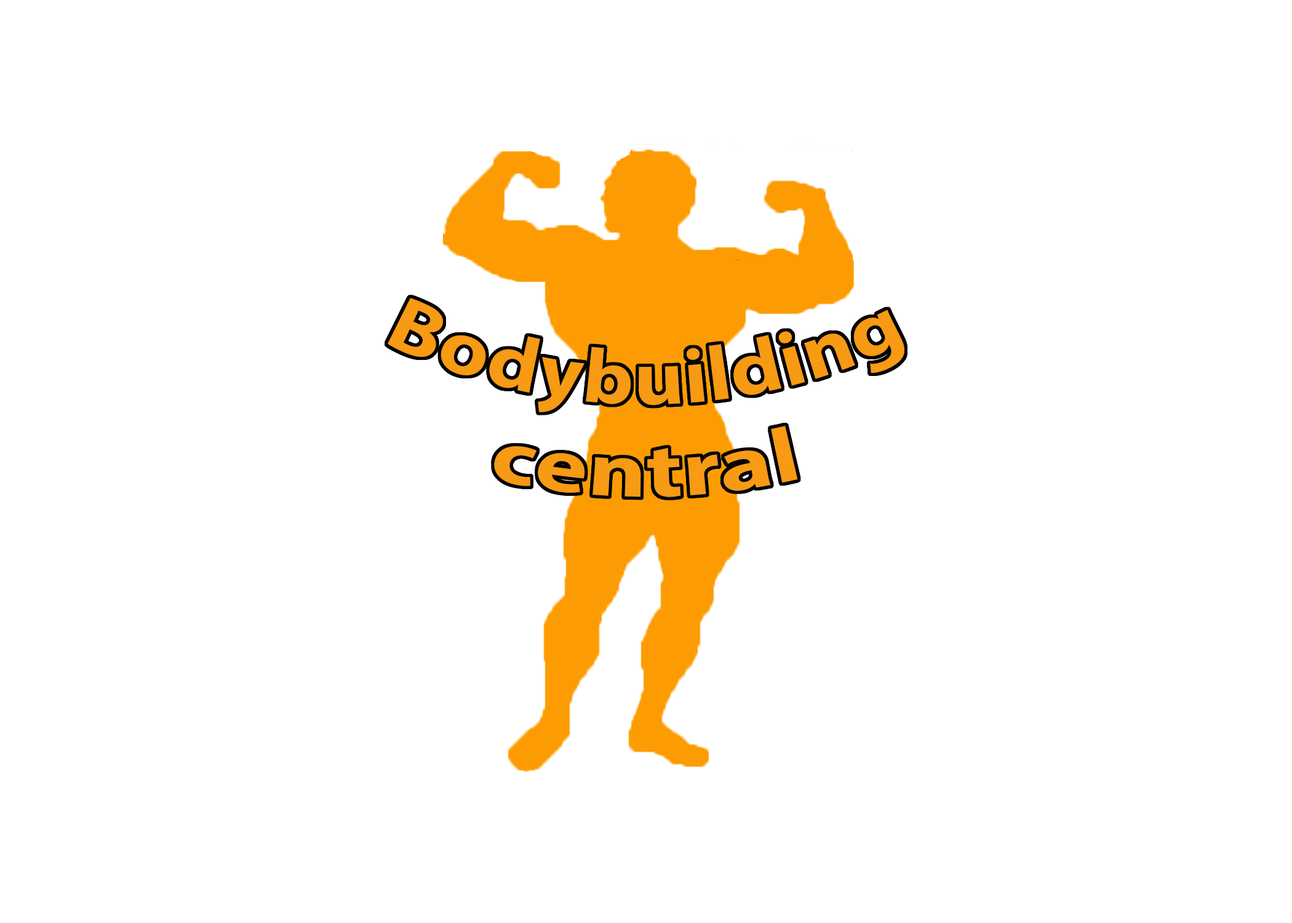
<style>
.page{position:relative;width:1292px;height:923px;background:#ffffff}
.page>*{position:absolute;margin:0}
.t1{font:76.9px "MyriadPro-Bold";color:#f79a14}
</style>
<div class="page">
<p class="t1" style="left:388px;top:298px;width:516px;height:199px;text-align:center">Bodybuilding<br>central</p>
</div>
